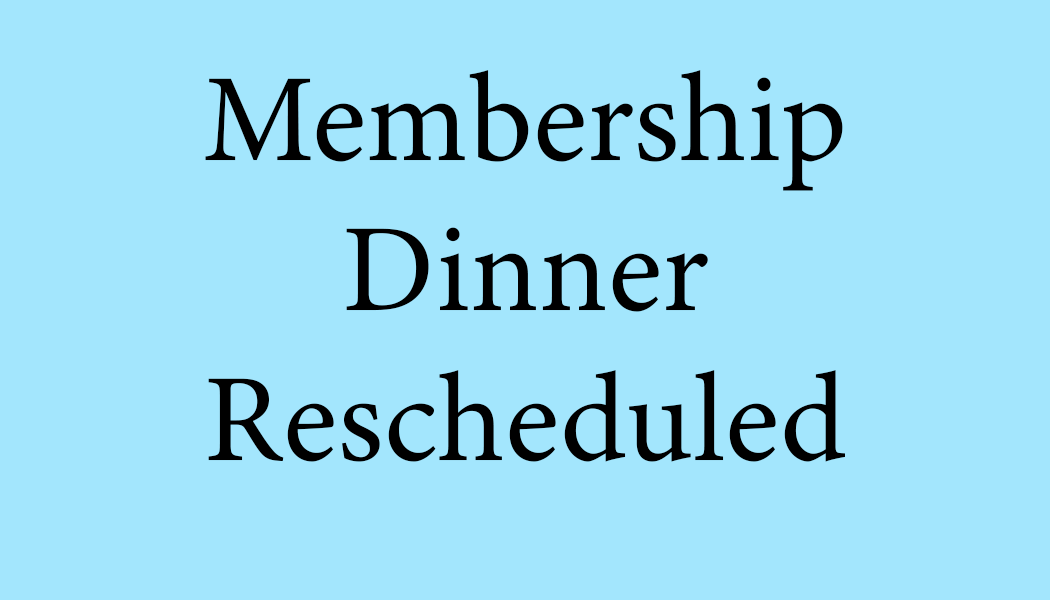
<style>
.page{position:relative;width:1050px;height:600px;background:#a3e6fd}
.page>*{position:absolute;margin:0}
.t1{font:125px "MinionVariableConcept-Roman";color:#000000}
</style>
<div class="page">
<p class="t1" style="left:205px;top:70px;width:640px;height:392px;text-align:center">Membership<br>Dinner<br>Rescheduled</p>
</div>
